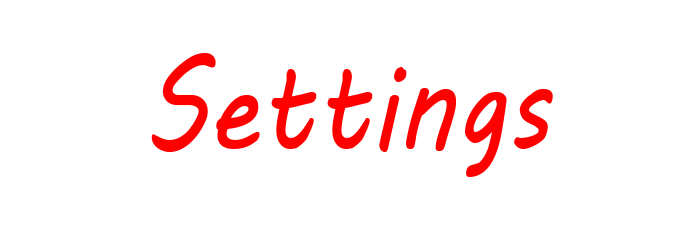
<style>
.page{position:relative;width:700px;height:250px;background:#ffffff}
.page>*{position:absolute;margin:0}
.t1{font:125px "MVBoli";color:#ff0000;scale:0.84 1}
</style>
<div class="page">
<p class="t1" style="left:151px;top:53px;width:402px;height:124px">Settings</p>
</div>
